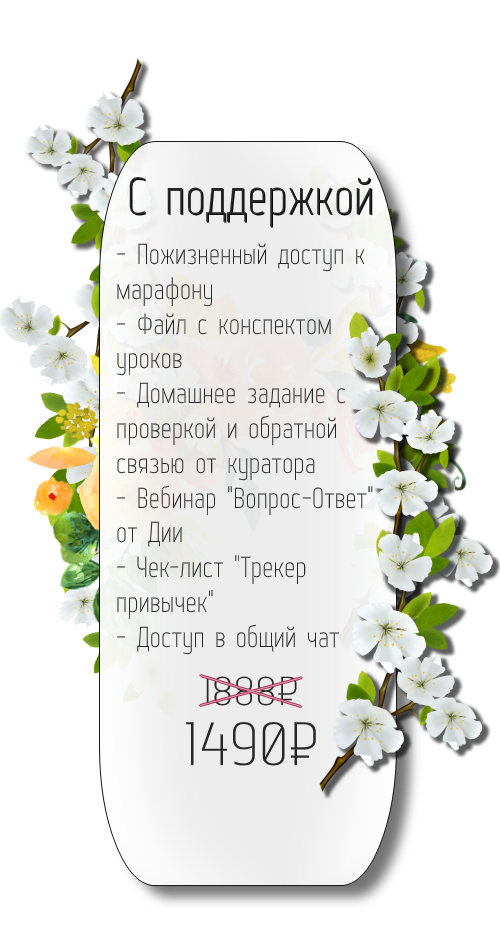
<style>
.page{position:relative;width:500px;height:950px;background:#ffffff}
.page>*{position:absolute;margin:0}
.t1{font:52px "WebServeroff";color:#272727}
.t2{font:29px "WebServeroff";color:#272727}
.t3{font:40.4px "WebServeroff";color:#272727;scale:1.28 1}
.t4{font:61.2px "WebServeroff";color:#272727;scale:1.15 1}
</style>
<div class="page">
<p class="t1" style="left:129px;top:177px;width:243px;height:50px">С поддержкой</p>
<p class="t2" style="left:117px;top:243px;width:256px;height:412px">- Пожизненный доступ к<br>марафону<br>- Файл с конспектом<br>уроков<br>- Домашнее задание с<br>проверкой и обратной<br>связью от куратора<br>- Вебинар "Вопрос-Ответ"<br>от Дии<br>- Чек-лист "Трекер<br>привычек"<br>- Доступ в общий чат</p>
<p class="t3" style="left:203px;top:676px;width:94px;height:30px">1888₽</p>
<p class="t4" style="left:186px;top:721px;width:130px;height:45px">1490₽</p>
</div>
